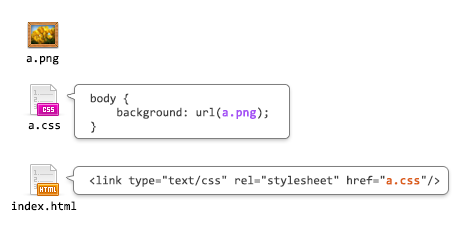
<style>
.page{position:relative;width:472px;height:234px;background:#ffffff}
.page>*{position:absolute;margin:0}
.t1{font:12px "Consolas";color:#000000}
.t2{font:12px/14px "Consolas";color:#414141}
.t3{font:12px/14px "Consolas";color:#a550f5;font-weight:bold}
.t4{font:12px "Consolas";color:#414141}
.t5{font:12px "Consolas";color:#db5f1b;font-weight:bold}
</style>
<div class="page">
<p class="t1" style="left:26px;top:56px;width:33px;height:9px">a.png</p>
<p class="t2" style="left:90px;top:93px;width:178px;height:40px">body {<br>    background: url(<span class="t3">a.png</span>);<br>}</p>
<p class="t1" style="left:28px;top:123px;width:32px;height:7px">a.css</p>
<p class="t4" style="left:89px;top:175px;width:351px;height:12px">&lt;link type="text/css" rel="stylesheet" href="<span class="t5">a.css</span>"/&gt;</p>
<p class="t1" style="left:12px;top:201px;width:65px;height:10px">index.html</p>
</div>
